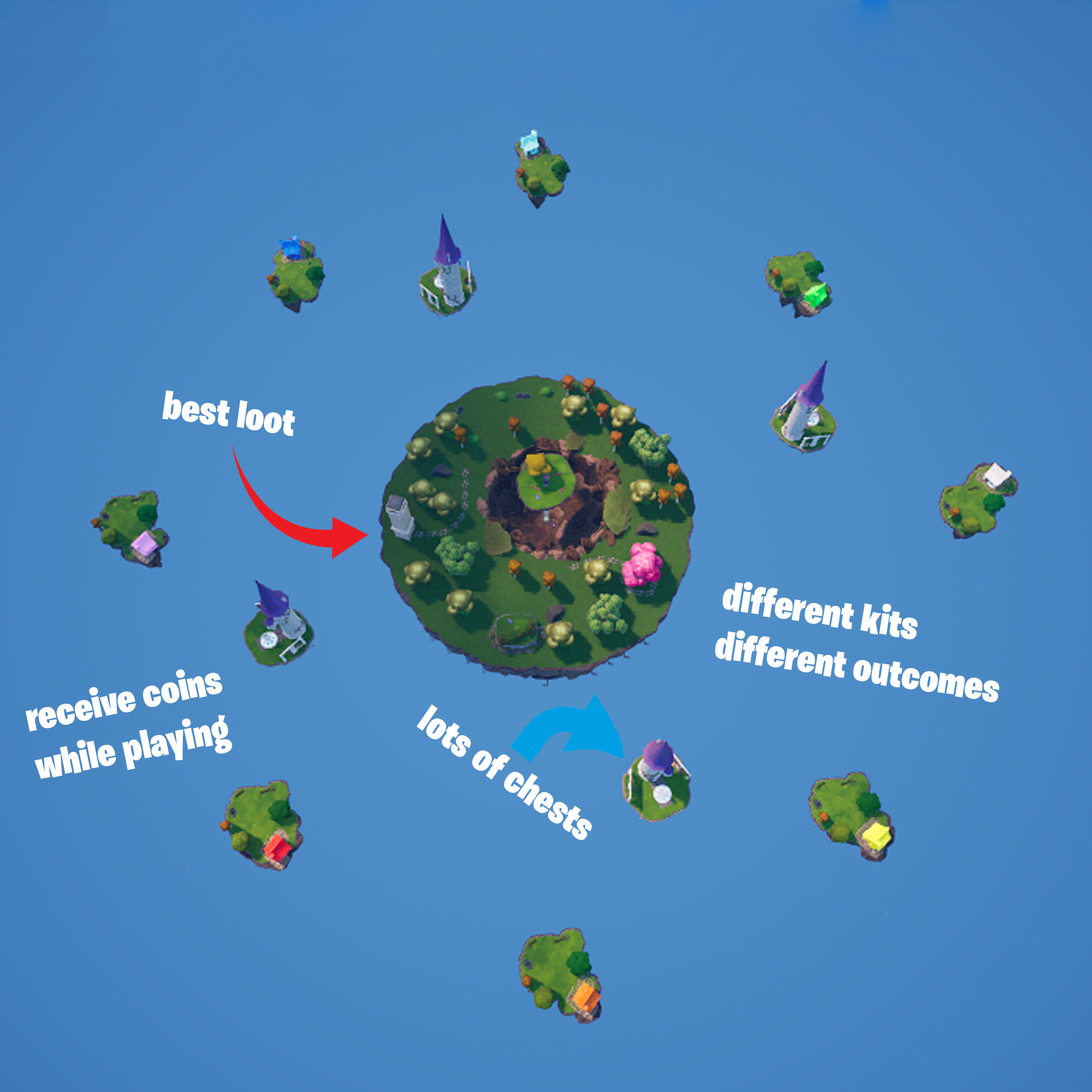
<style>
.page{position:relative;width:1092px;height:1092px}
.page>*{position:absolute;margin:0}
.t1{font:41.1px "BurbankBigCondensed-Black";color:#ffffff}
</style>
<div class="page">
<p class="t1" style="left:162px;top:390px;width:133px;height:46px;rotate:8deg">best loot</p>
<p class="t1" style="left:715px;top:582px;width:284px;height:120px;rotate:9deg">different kits different outcomes</p>
<p class="t1" style="left:26px;top:669px;width:206px;height:110px;rotate:-11deg">receive coins while playing</p>
<p class="t1" style="left:416px;top:704px;width:176px;height:136px;rotate:34deg">lots of chests</p>
</div>
